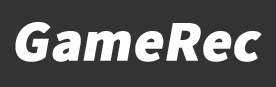
<style>
.page{position:relative;width:276px;height:87px;background:#333333}
.page>*{position:absolute;margin:0}
.t1{font:50px "SourceHanSansSC-Heavy";color:#ffffff;font-weight:bold;font-style:italic}
</style>
<div class="page">
<p class="t1" style="left:15px;top:22px;width:247px;height:40px">GameRec</p>
</div>
